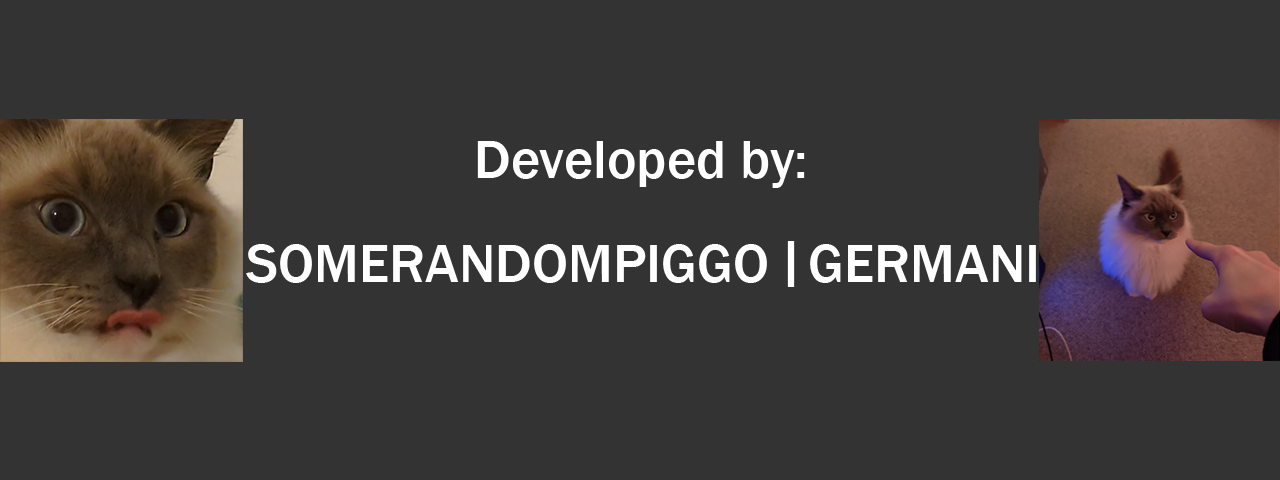
<style>
.page{position:relative;width:1280px;height:480px;background:#333333}
.page>*{position:absolute;margin:0}
.t1{font:56px "FranklinGothic-Medium";color:#ffffff}
</style>
<div class="page">
<p class="t1" style="left:477px;top:141px;width:328px;height:47px">Developed by:</p>
<p class="t1" style="left:246px;top:244px;width:521px;height:39px">SOMERANDOMPIGGO</p>
<p class="t1" style="left:787px;top:241px;width:8px;height:46px">|</p>
<p class="t1" style="left:810px;top:244px;width:226px;height:39px">GERMANI</p>
</div>
